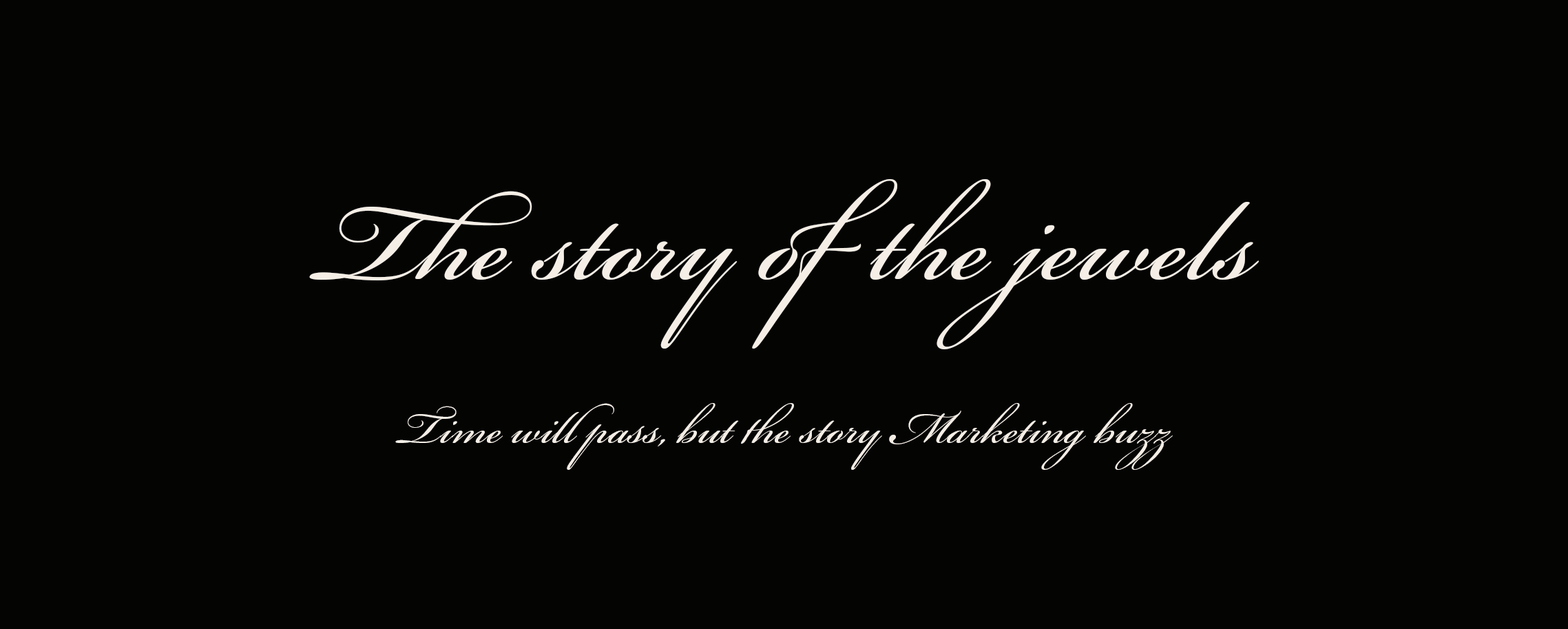
<style>
.page{position:relative;width:1568px;height:629px;background:#040403}
.page>*{position:absolute;margin:0}
.t1{font:174px "BickhamScriptPro-Regular";color:#f4eee6}
.t2{font:68.9px "BickhamScriptPro-Regular";color:#f4eee6}
</style>
<div class="page">
<p class="t1" style="left:309px;top:179px;width:950px;height:170px">The story of the jewels</p>
<p class="t2" style="left:395px;top:403px;width:778px;height:67px">Time will pass, but the story Marketing buzz</p>
</div>
